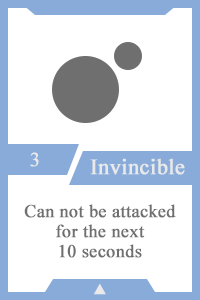
<style>
.page{position:relative;width:200px;height:300px;background:#ffffff}
.page>*{position:absolute;margin:0}
.t1{font:20px "TimesNewRomanPSMT";color:#e9e9e9;font-weight:bold}
.t2{font:22px "TimesNewRomanPSMT";color:#e9e9e9;font-weight:bold}
.t3{font:18px/20px "TimesNewRomanPSMT";color:#6f6f6f;font-weight:bold}
.t4{font:14px "AdobeHeitiStd-Regular";color:#e9e9e9;font-weight:bold}
</style>
<div class="page">
<p class="t1" style="left:30px;top:152px;width:9px;height:15px">3</p>
<p class="t2" style="left:90px;top:158px;width:95px;height:17px">Invincible</p>
<p class="t3" style="left:24px;top:204px;width:152px;height:54px;text-align:center">Can not be attacked<br>for the next<br>10 seconds</p>
<p class="t4" style="left:94px;top:284px;width:12px;height:11px">▲</p>
</div>
